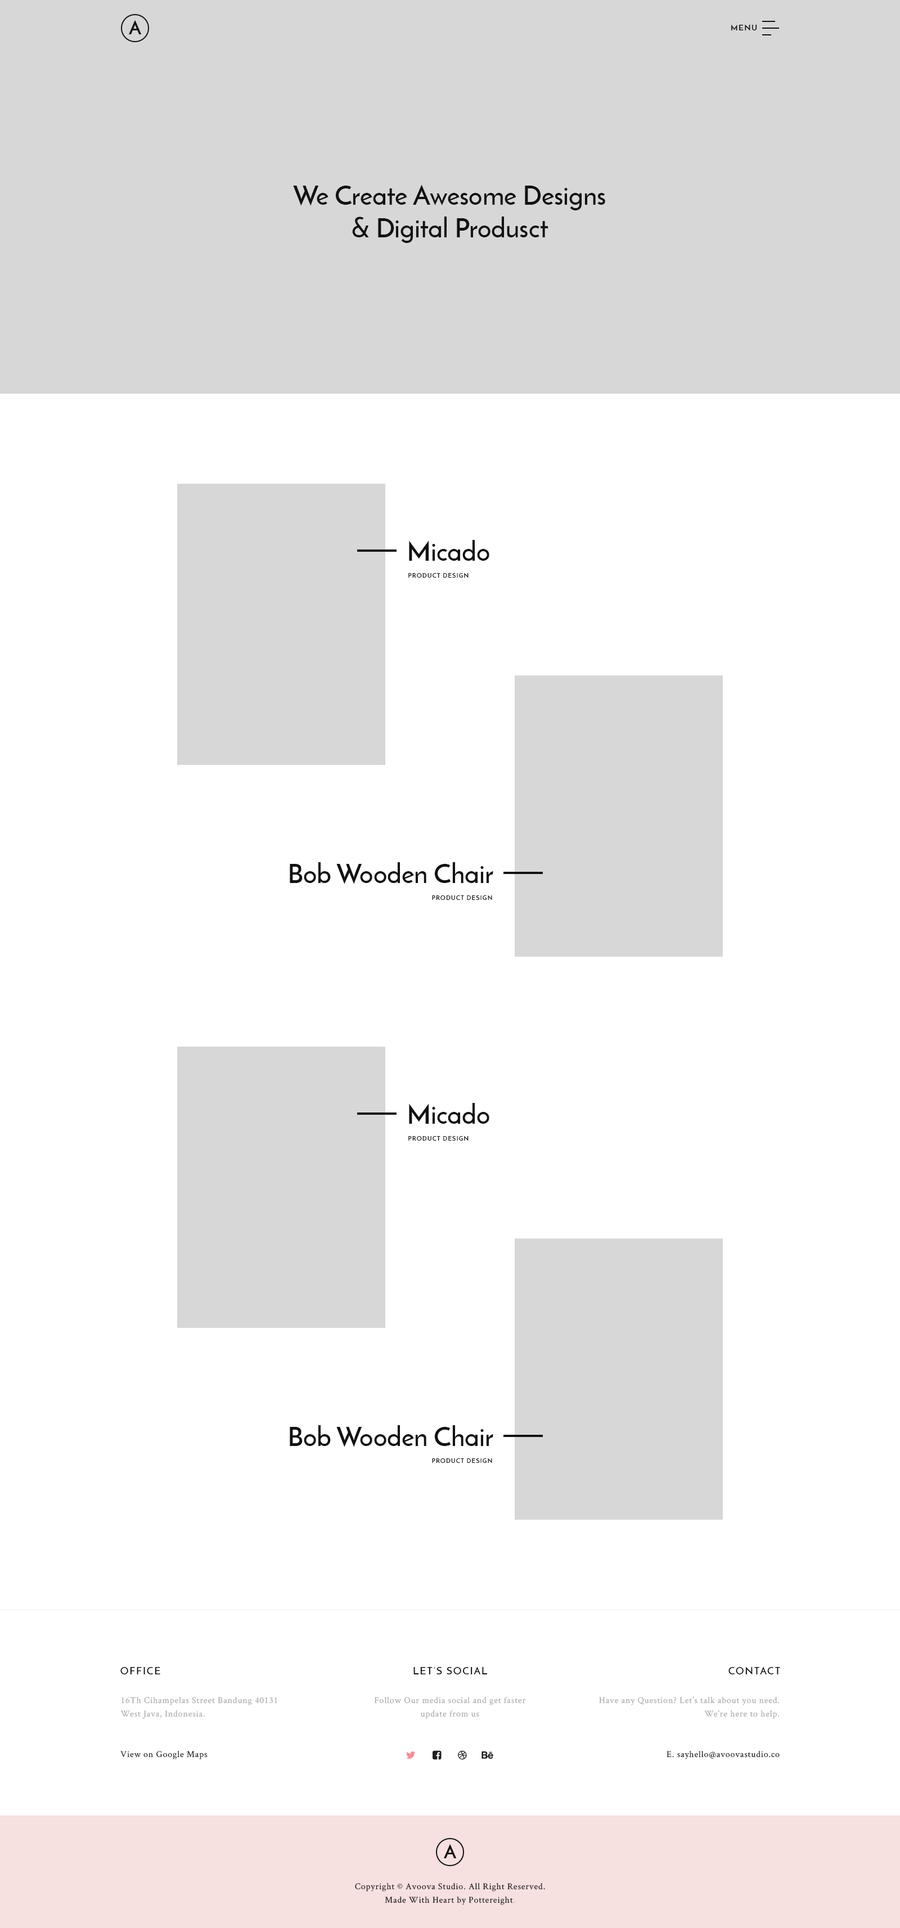
<style>
.page{position:relative;width:900px;height:1928px;background:#ffffff}
.page>*{position:absolute;margin:0}
.t1{font:19.1px "JosefinSans-Bold";letter-spacing:0.5em;color:#121212;text-transform:uppercase}
.t2{font:7.9px "JosefinSans-Bold";letter-spacing:0.1em;color:#121212;text-transform:uppercase}
.t3{font:27px "JosefinSans-SemiBold";color:#121212}
.t4{font:6.2px "JosefinSans-SemiBold";letter-spacing:0.1em;color:#121212;text-transform:uppercase}
.t5{font:10.1px "JosefinSans-SemiBold";letter-spacing:0.1em;color:#121212;text-transform:uppercase}
.t6{font:9px/13.5px "CrimsonText-Roman";letter-spacing:0.05em;color:#ababab}
.t7{font:9px "CrimsonText-Roman";letter-spacing:0.05em;color:#121212}
.t8{font:9px/13.5px "CrimsonText-Roman";letter-spacing:0.05em;color:#121212}
</style>
<div class="page">
<p class="t1" style="left:129px;top:20px;width:13px;height:14px">a</p>
<p class="t2" style="left:731px;top:24px;width:26px;height:7px">Menu</p>
<p class="t3" style="left:293px;top:184px;width:312px;height:59px;text-align:center">We Create Awesome Designs<br>&amp; Digital Produsct</p>
<p class="t3" style="left:409px;top:540px;width:80px;height:21px">Micado</p>
<p class="t4" style="left:408px;top:573px;width:61px;height:5px">Product Design</p>
<p class="t3" style="left:290px;top:862px;width:203px;height:22px">Bob Wooden Chair</p>
<p class="t4" style="left:432px;top:895px;width:60px;height:6px">Product Design</p>
<p class="t3" style="left:409px;top:1103px;width:80px;height:21px">Micado</p>
<p class="t4" style="left:408px;top:1136px;width:61px;height:5px">Product Design</p>
<p class="t3" style="left:290px;top:1425px;width:203px;height:22px">Bob Wooden Chair</p>
<p class="t4" style="left:432px;top:1458px;width:60px;height:6px">Product Design</p>
<p class="t5" style="left:120px;top:1667px;width:40px;height:8px">Office</p>
<p class="t5" style="left:413px;top:1667px;width:74px;height:8px">Let’s Social</p>
<p class="t5" style="left:728px;top:1667px;width:52px;height:8px">Contact</p>
<p class="t6" style="left:120px;top:1697px;width:157px;height:22px">16Th Cihampelas Street Bandung 40131<br>West Java, Indonesia.</p>
<p class="t6" style="left:374px;top:1697px;width:152px;height:22px;text-align:center">Follow Our media social and get faster<br>update from us</p>
<p class="t6" style="left:599px;top:1696px;width:181px;height:23px;text-align:right">Have any Question? Let’s talk about you need.<br>We’re here to help.</p>
<p class="t7" style="left:120px;top:1751px;width:88px;height:9px">View on Google Maps</p>
<p class="t7" style="left:667px;top:1751px;width:113px;height:9px">E. sayhello@avoovastudio.co</p>
<p class="t1" style="left:444px;top:1844px;width:13px;height:14px">a</p>
<p class="t8" style="left:355px;top:1883px;width:190px;height:22px;text-align:center">Copyright © Avoova Studio. All Right Reserved.<br>Made With Heart by Pottereight<span class="t6">.</span></p>
</div>
